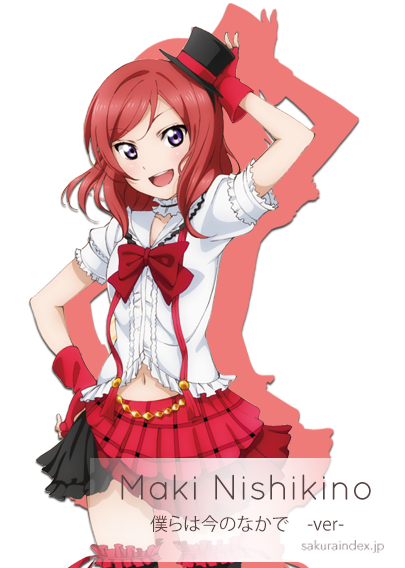
<style>
.page{position:relative;width:405px;height:568px;background:#ffffff}
.page>*{position:absolute;margin:0}
.t1{font:36px "QuicksandBook-Regular";color:#594443}
.t2{font:18px "KozGoPr6N-Regular";color:#594443}
.t3{font:12.8px "AvenirNextLTPro-Regular";color:#8f8282}
</style>
<div class="page">
<p class="t1" style="left:121px;top:474px;width:250px;height:26px">Maki Nishikino</p>
<p class="t2" style="left:150px;top:515px;width:194px;height:17px">僕らは今のなかで　-ver-</p>
<p class="t3" style="left:301px;top:540px;width:83px;height:13px">sakuraindex.jp</p>
</div>
